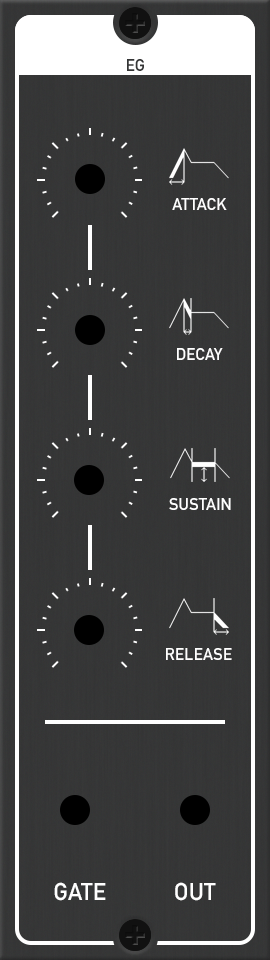
<style>
.page{position:relative;width:270px;height:960px}
.page>*{position:absolute;margin:0}
.t1{font:24px "DINAlternate-Bold";color:#ffffff;font-variant:small-caps}
</style>
<div class="page">
<p class="t1" style="left:172px;top:198px;width:55px;height:12px">attack</p>
<p class="t1" style="left:177px;top:348px;width:46px;height:12px">decay</p>
<p class="t1" style="left:169px;top:498px;width:62px;height:12px">sustain</p>
<p class="t1" style="left:166px;top:648px;width:66px;height:12px">release</p>
<p class="t1" style="left:54px;top:882px;width:52px;height:19px">GATE</p>
<p class="t1" style="left:175px;top:882px;width:41px;height:19px">OUT</p>
</div>
